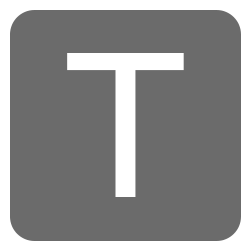
<style>
.page{position:relative;width:250px;height:250px;background:#6b6b6b}
.page>*{position:absolute;margin:0}
.t1{font:200px "Helvetica";color:#ffffff}
</style>
<div class="page">
<p class="t1" style="left:67px;top:53px;width:117px;height:144px">T</p>
</div>
